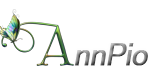
<style>
.page{position:relative;width:150px;height:80px;background:#ffffff}
.page>*{position:absolute;margin:0}
.t1{font:30px "MicrosoftSansSerif";letter-spacing:-0.025em;font-weight:bold;font-style:italic;scale:0.95 1}
</style>
<div class="page">
<p class="t1" style="left:74px;top:43px;width:74px;height:23px">nnPio</p>
</div>
